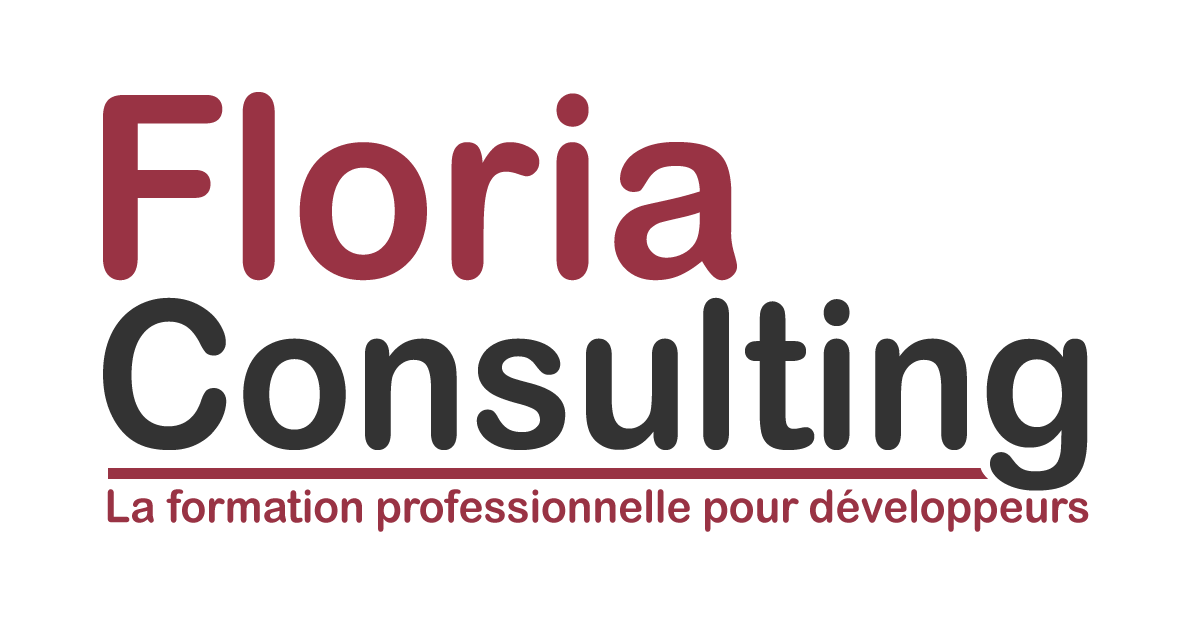
<style>
.page{position:relative;width:1200px;height:627px;background:#ffffff}
.page>*{position:absolute;margin:0}
.t1{font:254.3px "ArialRoundedMTBold";color:#993344;scale:0.94 1}
.t2{font:205.1px "ArialRoundedMTBold";color:#333333;scale:0.94 1}
.t3{font:45.2px "ArialRoundedMTBold";color:#993344;scale:0.94 1}
</style>
<div class="page">
<p class="t1" style="left:103px;top:92px;width:634px;height:189px">Floria</p>
<p class="t2" style="left:103px;top:297px;width:985px;height:194px">Consulting</p>
<p class="t3" style="left:107px;top:489px;width:982px;height:43px">La formation professionnelle pour développeurs</p>
</div>
